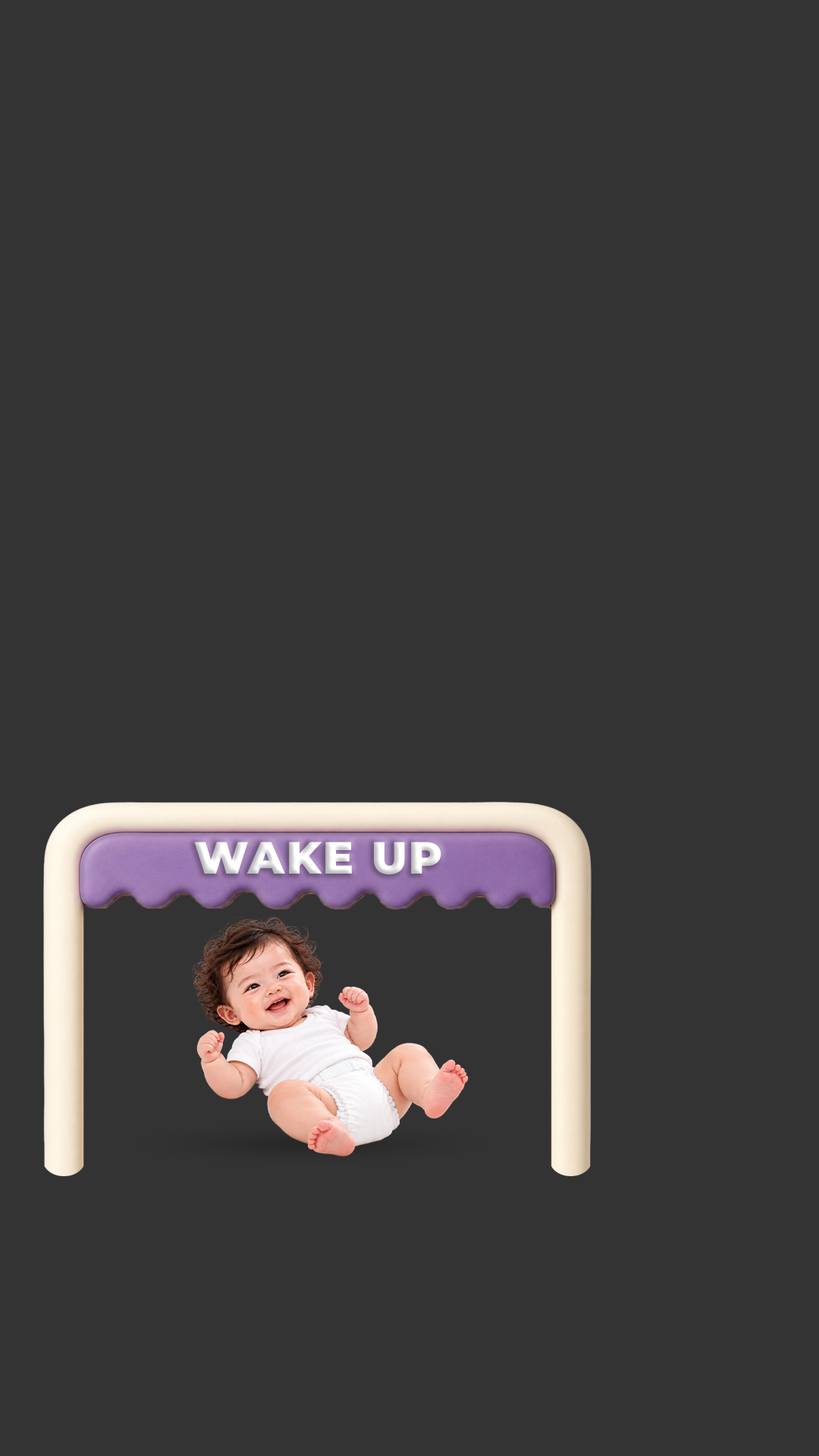
<style>
.page{position:relative;width:819px;height:1456px;background:#333333}
.page>*{position:absolute;margin:0}
.t1{font:44.9px "Montserrat-Black";letter-spacing:0.05em;text-transform:uppercase}
</style>
<div class="page">
<p class="t1" style="left:194px;top:842px;width:247px;height:32px">Wake up</p>
</div>
